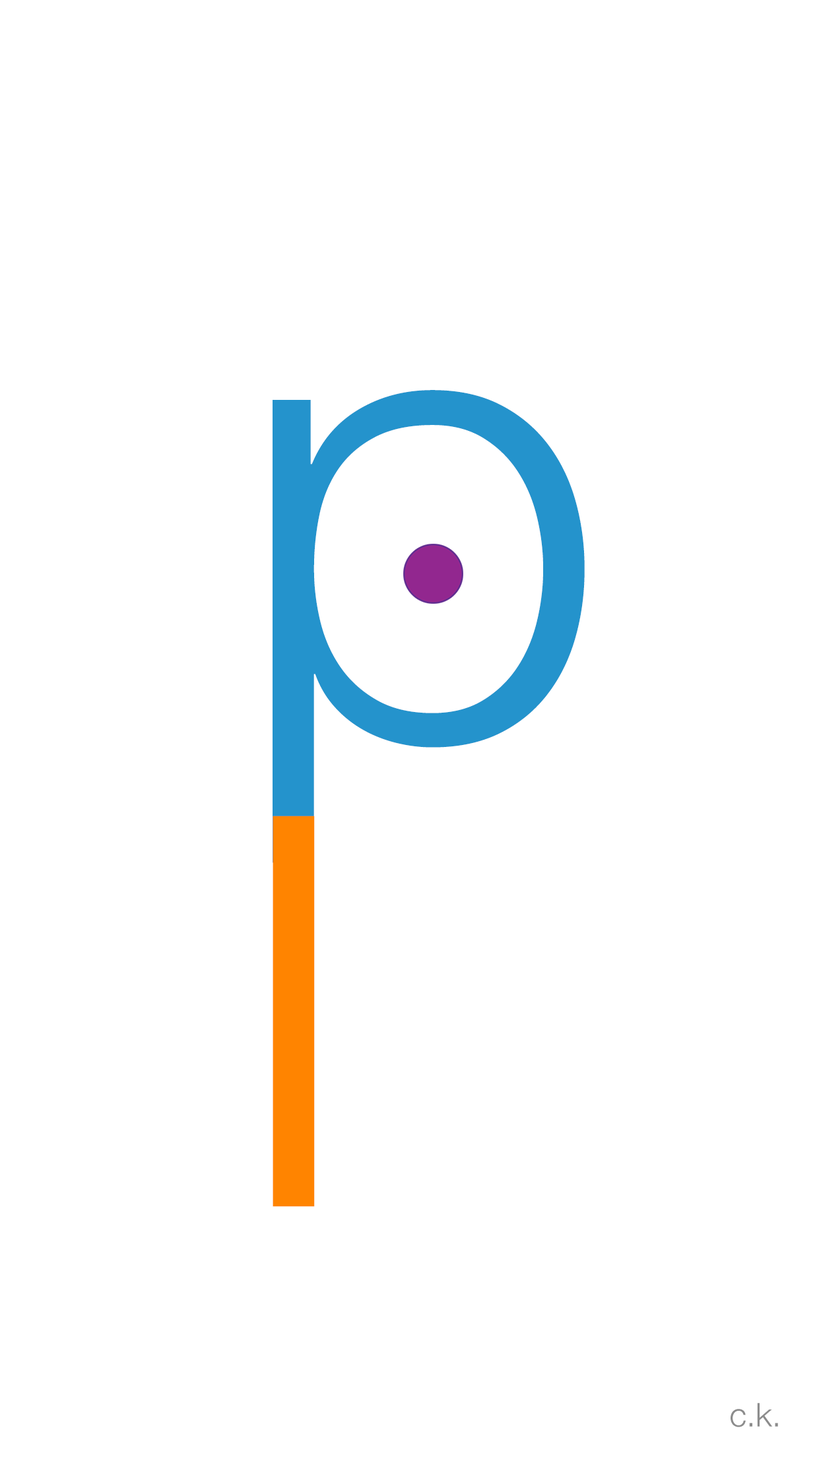
<style>
.page{position:relative;width:819px;height:1457px;background:#ffffff}
.page>*{position:absolute;margin:0}
.t1{font:655.1px "HelveticaNeue-Light";color:#2493cc}
.t2{font:546.3px "HelveticaNeue-Light";color:#ff8400;scale:1.2 1}
.t3{font:32.8px "HelveticaNeue-Light";color:#8c8c8c}
</style>
<div class="page">
<p class="t1" style="left:272px;top:390px;width:312px;height:473px">p</p>
<p class="t2" style="left:272px;top:815px;width:43px;height:392px">l</p>
<p class="t3" style="left:730px;top:1402px;width:48px;height:25px">c.k.</p>
</div>
